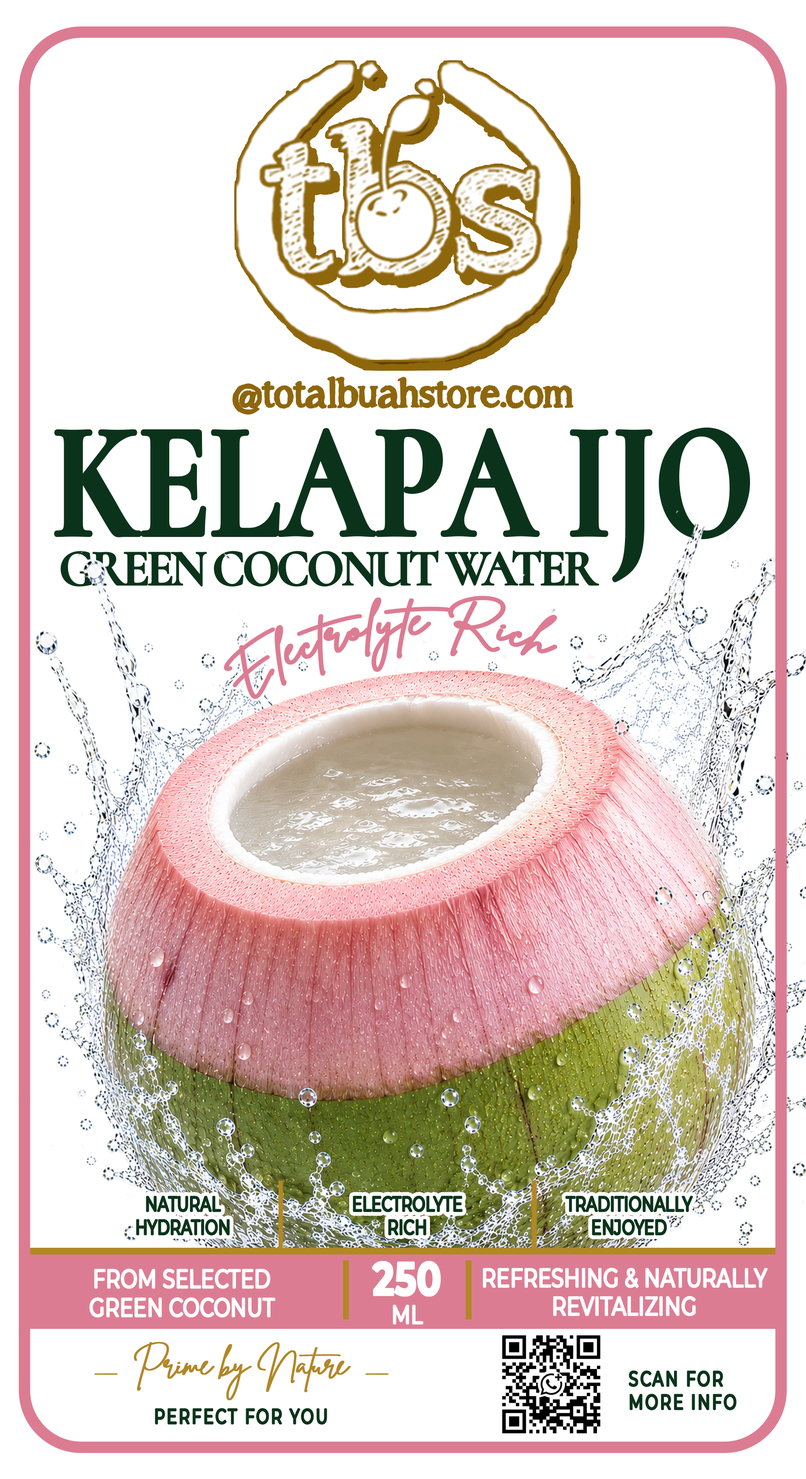
<style>
.page{position:relative;width:806px;height:1479px;background:#ffffff}
.page>*{position:absolute;margin:0}
.t1{font:49.2px "ASongforJennifer";color:#8e660c}
.t2{font:164.9px "Cormorant-Bold";color:#0b321a;scale:0.79 1}
.t3{font:164.9px "CormorantInfant-Bold";color:#0b321a;scale:0.79 1}
.t4{font:51.8px "Cormorant-Bold";letter-spacing:-0.06em;color:#0b321a;scale:0.95 1}
.t5{font:38.1px "BrittanySignatureRegular";letter-spacing:0.02em;color:#dc7c93;scale:1.25 1}
.t6{font:20.7px/23.3px "Montserrat-Regular";color:#0b331b;font-weight:bold;scale:0.72 1}
.t7{font:46.5px/28.4px "Montserrat-Bold";color:#ffffff;font-weight:bold;scale:0.76 1}
.t8{font:25.8px/28.4px "Montserrat-Regular";color:#ffffff;font-weight:bold;scale:0.76 1}
.t9{font:30.4px/7.7px "BrittanySignatureRegular";letter-spacing:-0.06em;color:#b28725;font-weight:bold;scale:1.19 1}
.t10{font:34.7px "BrittanySignatureRegular";letter-spacing:-0.06em;color:#b28725;scale:1.78 1}
.t11{font:20.7px/23.3px "Montserrat-Regular";letter-spacing:0.12em;color:#0b331b;font-weight:bold;scale:0.72 1}
.t12{font:20.7px "Montserrat-Regular";letter-spacing:0.12em;color:#0b331b;font-weight:bold;scale:0.72 1}
</style>
<div class="page">
<p class="t1" style="left:233px;top:376px;width:341px;height:38px">@totalbuahstore.com</p>
<p class="t2" style="left:56px;top:429px;width:692px;height:151px">KELAPA <span class="t3">IJO</span></p>
<p class="t4" style="left:61px;top:551px;width:538px;height:35px">GREEN COCONUT WATER</p>
<p class="t5" style="left:225px;top:597px;width:331px;height:101px;rotate:-7deg">Electrolyte Rich</p>
<p class="t6" style="left:137px;top:1196px;width:92px;height:38px;text-align:center">NATURAL<br>HYDRATION</p>
<p class="t6" style="left:354px;top:1196px;width:108px;height:38px;text-align:center">ELECTROLYTE<br>RICH</p>
<p class="t6" style="left:566px;top:1196px;width:127px;height:38px;text-align:center">TRADITIONALLY<br>ENJOYED</p>
<p class="t7" style="left:373px;top:1261px;width:67px;height:63px;text-align:center">250<br><span class="t8">ML</span></p>
<p class="t8" style="left:90px;top:1269px;width:185px;height:47px;text-align:center">FROM SELECTED<br>GREEN COCONUT</p>
<p class="t8" style="left:484px;top:1268px;width:284px;height:47px;text-align:center">REFRESHING &amp; NATURALLY<br>REVITALIZING</p>
<p class="t9" style="left:134px;top:1341px;width:217px;height:59px;text-align:center">Prime by Nature</p>
<p class="t10" style="left:94px;top:1373px;width:295px;height:2px">_                _</p>
<p class="t11" style="left:630px;top:1371px;width:106px;height:38px">SCAN FOR<br>MORE INFO</p>
<p class="t12" style="left:155px;top:1408px;width:172px;height:15px">PERFECT FOR YOU</p>
</div>
